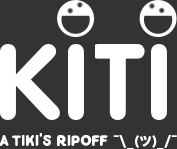
<style>
.page{position:relative;width:177px;height:149px;background:#333333}
.page>*{position:absolute;margin:0}
.t1{font:16px "FS-North-Land-Sans";color:#ffffff}
.t2{font:13px "HiraKakuStdN-W8";color:#ffffff}
</style>
<div class="page">
<p class="t1" style="left:0px;top:133px;width:177px;height:16px">A Tiki's ripoff <span class="t2">¯\_(ツ)_/¯</span></p>
</div>
